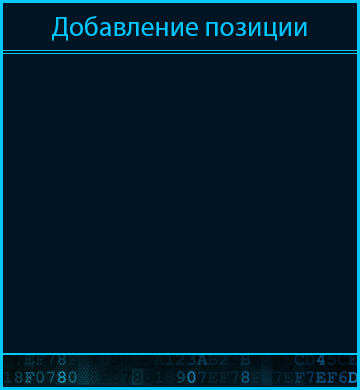
<style>
.page{position:relative;width:360px;height:390px;background:#001523}
.page>*{position:absolute;margin:0}
.t1{font:27.8px "MyriadPro-Regular";color:#00c7ff}
</style>
<div class="page">
<p class="t1" style="left:52px;top:16px;width:255px;height:25px">Добавление позиции</p>
</div>
